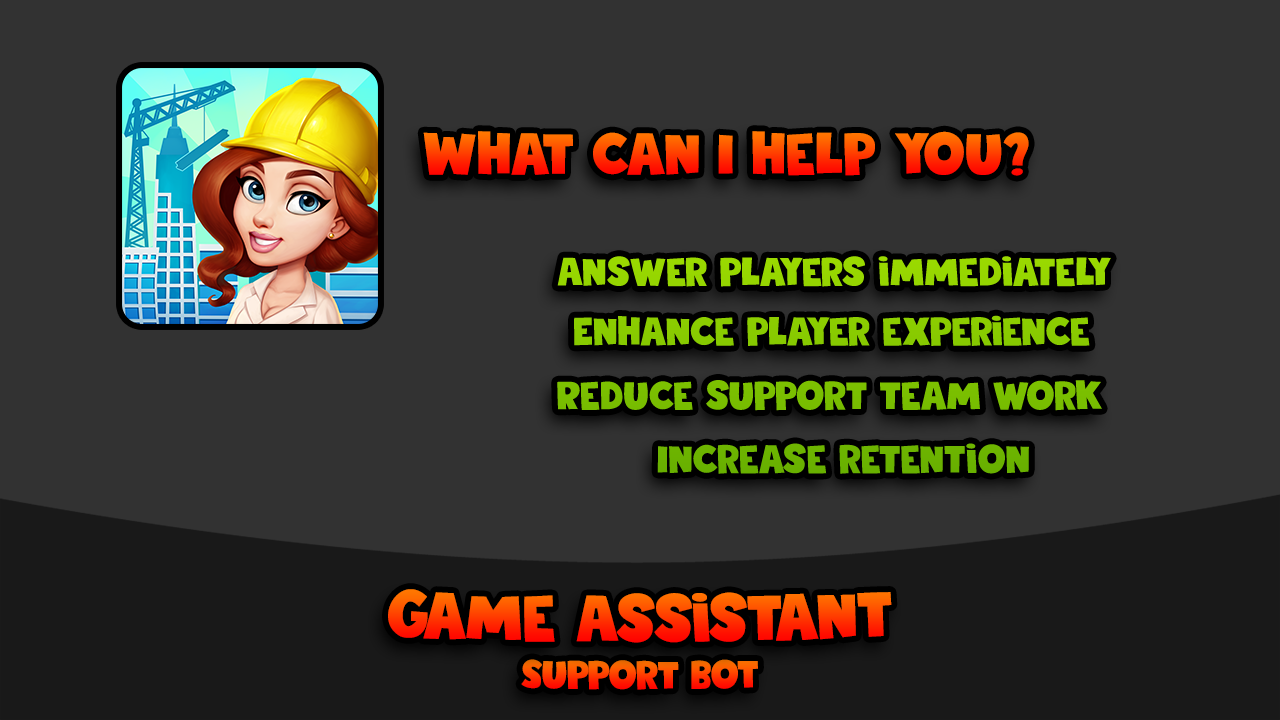
<style>
.page{position:relative;width:1280px;height:720px;background:#323232}
.page>*{position:absolute;margin:0}
.t1{font:60px "DKStickyToffee-Regular"}
.t2{font:40.7px "DKStickyToffee-Regular";color:#97d700}
.t3{font:40.7px "DKStickyToffee-Regular";color:#89cb00}
.t4{font:40.7px "DKStickyToffee-Regular";color:#7abf00}
.t5{font:40.7px "DKStickyToffee-Regular";color:#6ab200}
.t6{font:66.7px "DKStickyToffee-Regular"}
.t7{font:40px "DKStickyToffee-Regular"}
</style>
<div class="page">
<p class="t1" style="left:423px;top:131px;width:606px;height:45px">What can I help you?</p>
<p class="t2" style="left:557px;top:256px;width:554px;height:31px">Answer players immediately</p>
<p class="t3" style="left:574px;top:315px;width:516px;height:31px">Enhance player experience</p>
<p class="t4" style="left:557px;top:380px;width:545px;height:31px">Reduce support team work</p>
<p class="t5" style="left:657px;top:443px;width:372px;height:31px">Increase retention</p>
<p class="t6" style="left:388px;top:589px;width:504px;height:54px">Game Assistant</p>
<p class="t7" style="left:521px;top:659px;width:237px;height:31px">Support bot</p>
</div>
